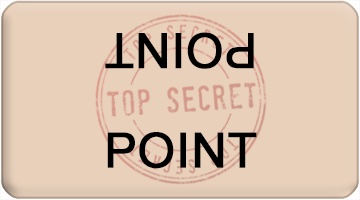
<style>
.page{position:relative;width:360px;height:200px;background:#e8d0bb}
.page>*{position:absolute;margin:0}
.t1{font:48px "ArialMT";color:#000000;font-weight:bold}
</style>
<div class="page">
<p class="t1" style="left:105px;top:32px;width:149px;height:37px;rotate:180deg">POINT</p>
<p class="t1" style="left:107px;top:132px;width:150px;height:37px">POINT</p>
</div>
